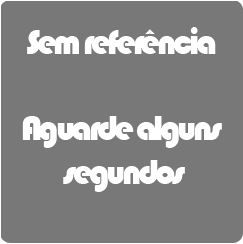
<style>
.page{position:relative;width:243px;height:244px;background:#787878}
.page>*{position:absolute;margin:0}
.t1{font:36px "Bauhaus93";letter-spacing:-0.1em;color:#ffffff}
</style>
<div class="page">
<p class="t1" style="left:22px;top:27px;width:200px;height:165px;text-align:center">Sem referência<br><br>Aguarde alguns<br> segundos</p>
</div>
